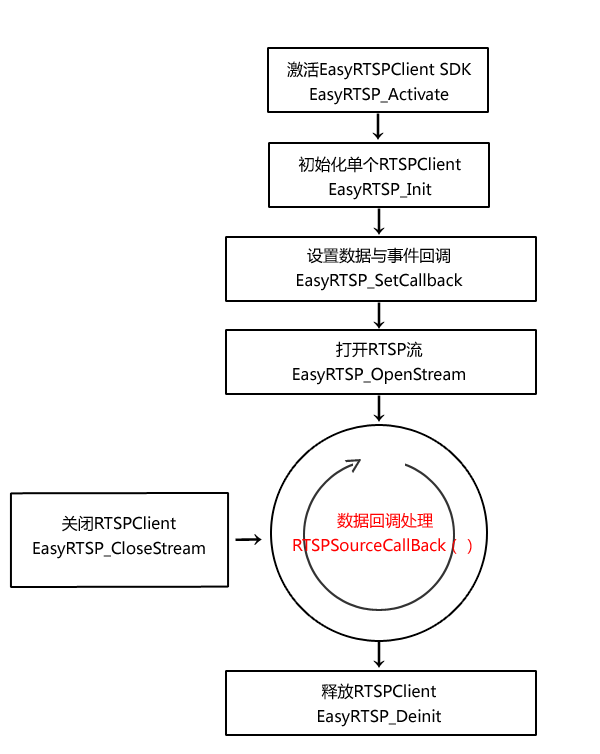
<style>
.page{position:relative;width:600px;height:754px;background:#ffffff}
.page>*{position:absolute;margin:0}
.t1{font:16px/24.6px "MicrosoftYaHei";color:#000000}
.t2{font:30px "MicrosoftYaHei";color:#000000}
.t3{font:30px "MicrosoftYaHei";color:#333333}
.t4{font:16px/24.6px "MicrosoftYaHei";color:#ff0000}
</style>
<div class="page">
<p class="t1" style="left:287px;top:61px;width:185px;height:44px;text-align:center">激活EasyRTSPClient SDK<br>EasyRTSP_Activate</p>
<p class="t2" style="left:372px;top:113px;width:12px;height:27px">↓</p>
<p class="t1" style="left:298px;top:156px;width:163px;height:44px;text-align:center">初始化单个RTSPClient<br>EasyRTSP_Init</p>
<p class="t2" style="left:373px;top:208px;width:12px;height:27px">↓</p>
<p class="t1" style="left:297px;top:247px;width:166px;height:44px;text-align:center">设置数据与事件回调<br>EasyRTSP_SetCallback</p>
<p class="t2" style="left:373px;top:302px;width:12px;height:27px">↓</p>
<p class="t1" style="left:293px;top:341px;width:172px;height:44px;text-align:center">打开RTSP流<br>EasyRTSP_OpenStream</p>
<p class="t2" style="left:373px;top:395px;width:12px;height:27px">↓</p>
<p class="t3" style="left:344px;top:459px;width:17px;height:14px;rotate:-33deg">&gt;</p>
<p class="t1" style="left:33px;top:515px;width:172px;height:44px;text-align:center">关闭RTSPClient<br>EasyRTSP_CloseStream</p>
<p class="t4" style="left:293px;top:512px;width:179px;height:42px;text-align:center">数据回调处理<br>RTSPSourceCallBack（）</p>
<p class="t2" style="left:235px;top:534px;width:27px;height:11px;rotate:-90deg">↓</p>
<p class="t2" style="left:373px;top:641px;width:12px;height:27px">↓</p>
<p class="t1" style="left:318px;top:683px;width:123px;height:44px;text-align:center">释放RTSPClient<br>EasyRTSP_Deinit</p>
</div>
